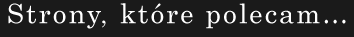
<style>
.page{position:relative;width:354px;height:37px;background:#1a1a1a}
.page>*{position:absolute;margin:0}
.t1{font:27px "Century";letter-spacing:0.075em;color:#ffffff}
.t2{font:21.9px "LucidaConsole";letter-spacing:0.075em;color:#ffffff;font-weight:bold}
</style>
<div class="page">
<p class="t1" style="left:8px;top:3px;width:338px;height:26px"><span class="t2"><br><br></span>Strony, które polecam...</p>
</div>
